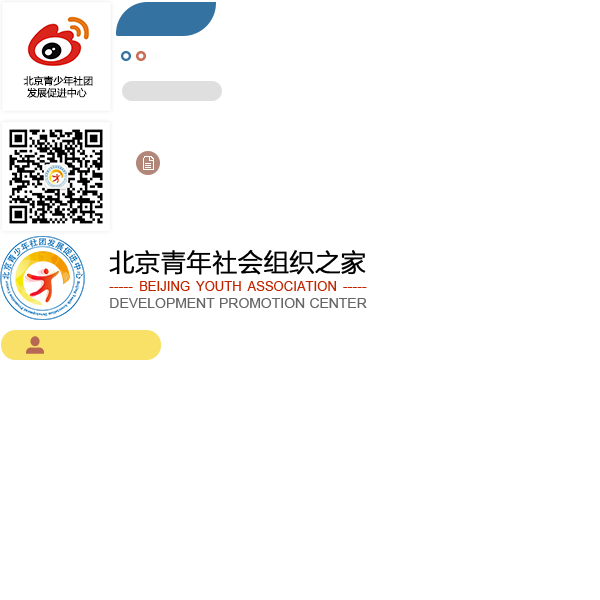
<style>
.page{position:relative;width:600px;height:600px;background:#ffffff}
.page>*{position:absolute;margin:0}
.t1{font:9.9px "MicrosoftYaHei";color:#000000}
.t2{font:25.1px "FZLTXHJW--GB1-0";color:#000000;font-weight:bold}
.t3{font:13.7px "ArialMT";color:#666666;text-transform:uppercase}
.t4{font:13.7px "ArialMT";color:#c02700;text-transform:uppercase}
.t5{font:12.9px "ArialMT";color:#c02700;text-transform:uppercase}
</style>
<div class="page">
<p class="t1" style="left:23px;top:75px;width:70px;height:23px;text-align:center">北京青少年社团<br>发展促进中心</p>
<p class="t2" style="left:109px;top:249px;width:257px;height:26px">北京青年社会组织之家</p>
<p class="t3" style="left:109px;top:281px;width:258px;height:27px;text-align:justify"><span class="t4">----- </span><span class="t5">Beijing Youth Association</span><span class="t4"> ----- <br></span>Development Promotion Center</p>
</div>
